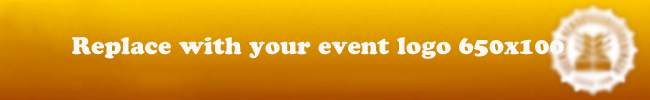
<style>
.page{position:relative;width:650px;height:100px}
.page>*{position:absolute;margin:0}
.t1{font:24px "CooperBlackStd";color:#faf8f6}
</style>
<div class="page">
<p class="t1" style="left:72px;top:37px;width:492px;height:22px">Replace with your event logo 650x100</p>
</div>
